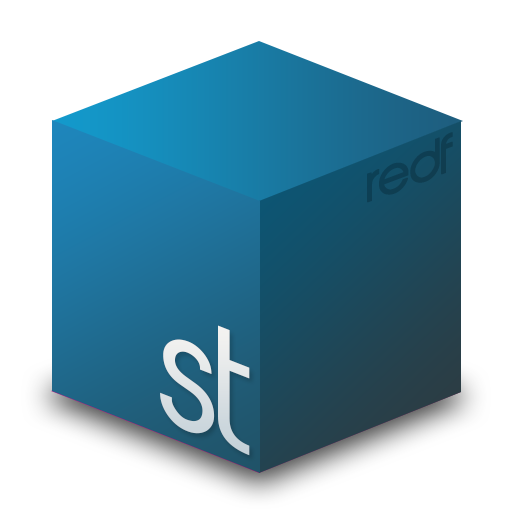
<style>
.page{position:relative;width:512px;height:512px;background:#ffffff}
.page>*{position:absolute;margin:0}
.t1{font:48px "AbeatbyKai";letter-spacing:-0.05em;color:#0e3e52;font-weight:bold;scale:1.07 1}
.t2{font:150px "AbeatbyKai";letter-spacing:-0.05em;color:#dee4e6;scale:1.07 1}
</style>
<div class="page">
<p class="t1" style="left:367px;top:132px;width:86px;height:71px;rotate:-21deg">redf</p>
<p class="t2" style="left:160px;top:325px;width:90px;height:131px;rotate:21deg">st</p>
</div>
